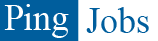
<style>
.page{position:relative;width:158px;height:41px;background:#ffffff}
.page>*{position:absolute;margin:0}
.t1{font:37.2px "TimesNewRomanPSMT";color:#ffffff;scale:0.96 1}
.t2{font:37.2px "TimesNewRomanPSMT";color:#005e9d;scale:0.96 1}
</style>
<div class="page">
<p class="t1" style="left:4px;top:4px;width:65px;height:34px">Ping</p>
<p class="t2" style="left:86px;top:7px;width:63px;height:26px">Jobs</p>
</div>
